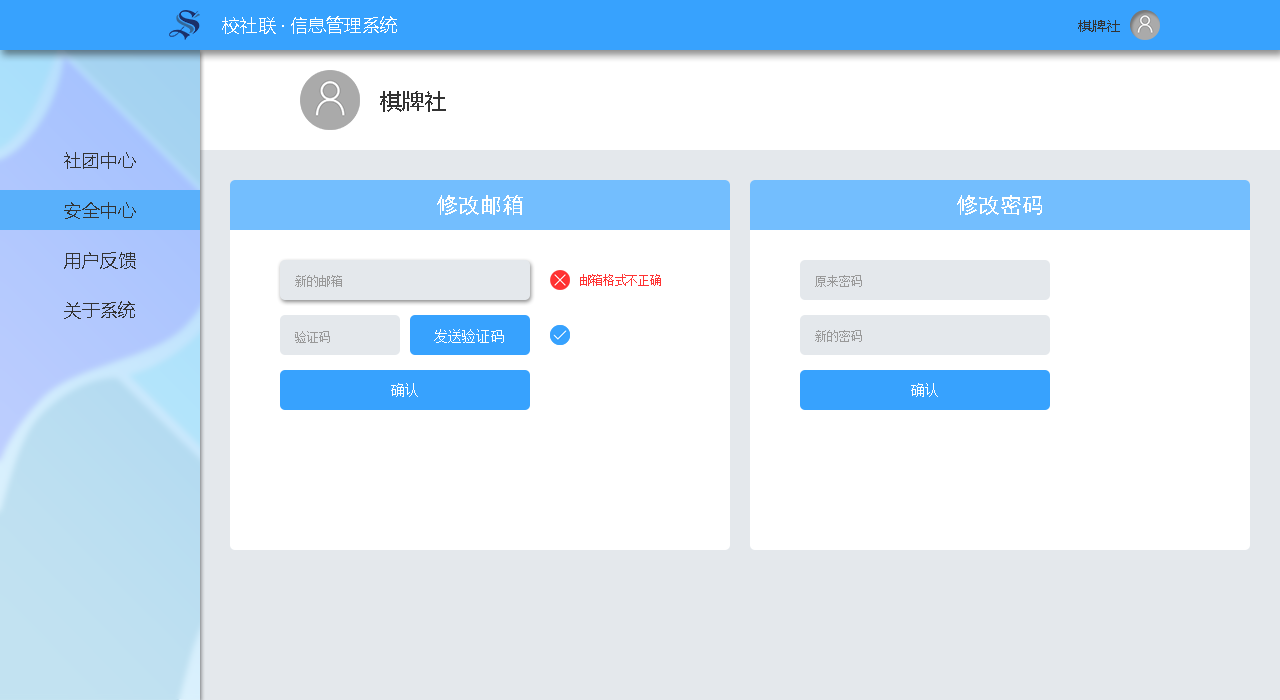
<style>
.page{position:relative;width:1280px;height:700px;background:#ffffff}
.page>*{position:absolute;margin:0}
.t1{font:18px "MicrosoftYaHei";color:#ffffff}
.t2{font:14px "MicrosoftYaHei";color:#333333}
.t3{font:22px "MicrosoftYaHei";color:#333333}
.t4{font:18px "MicrosoftYaHei";color:#333333}
.t5{font:22px "SimHei";color:#ffffff}
.t6{font:12px "SimSun";color:#999999}
.t7{font:12px "SimSun";color:#ff3333}
.t8{font:14px "SimSun";color:#ffffff}
</style>
<div class="page">
<p class="t1" style="left:222px;top:16px;width:175px;height:18px">校社联 · 信息管理系统</p>
<p class="t2" style="left:1078px;top:20px;width:42px;height:12px">棋牌社</p>
<p class="t3" style="left:380px;top:91px;width:66px;height:21px">棋牌社</p>
<p class="t4" style="left:64px;top:152px;width:72px;height:17px">社团中心</p>
<p class="t5" style="left:437px;top:195px;width:86px;height:20px">修改邮箱</p>
<p class="t5" style="left:957px;top:195px;width:85px;height:20px">修改密码</p>
<p class="t4" style="left:64px;top:202px;width:72px;height:17px">安全中心</p>
<p class="t4" style="left:64px;top:252px;width:72px;height:17px">用户反馈</p>
<p class="t6" style="left:295px;top:275px;width:47px;height:12px">新的邮箱</p>
<p class="t7" style="left:580px;top:274px;width:81px;height:12px">邮箱格式不正确</p>
<p class="t6" style="left:815px;top:275px;width:47px;height:12px">原来密码</p>
<p class="t4" style="left:64px;top:301px;width:71px;height:18px">关于系统</p>
<p class="t8" style="left:434px;top:329px;width:70px;height:14px">发送验证码</p>
<p class="t6" style="left:295px;top:331px;width:35px;height:12px">验证码</p>
<p class="t6" style="left:815px;top:330px;width:47px;height:12px">新的密码</p>
<p class="t8" style="left:391px;top:383px;width:27px;height:14px">确认</p>
<p class="t8" style="left:911px;top:383px;width:27px;height:14px">确认</p>
</div>
